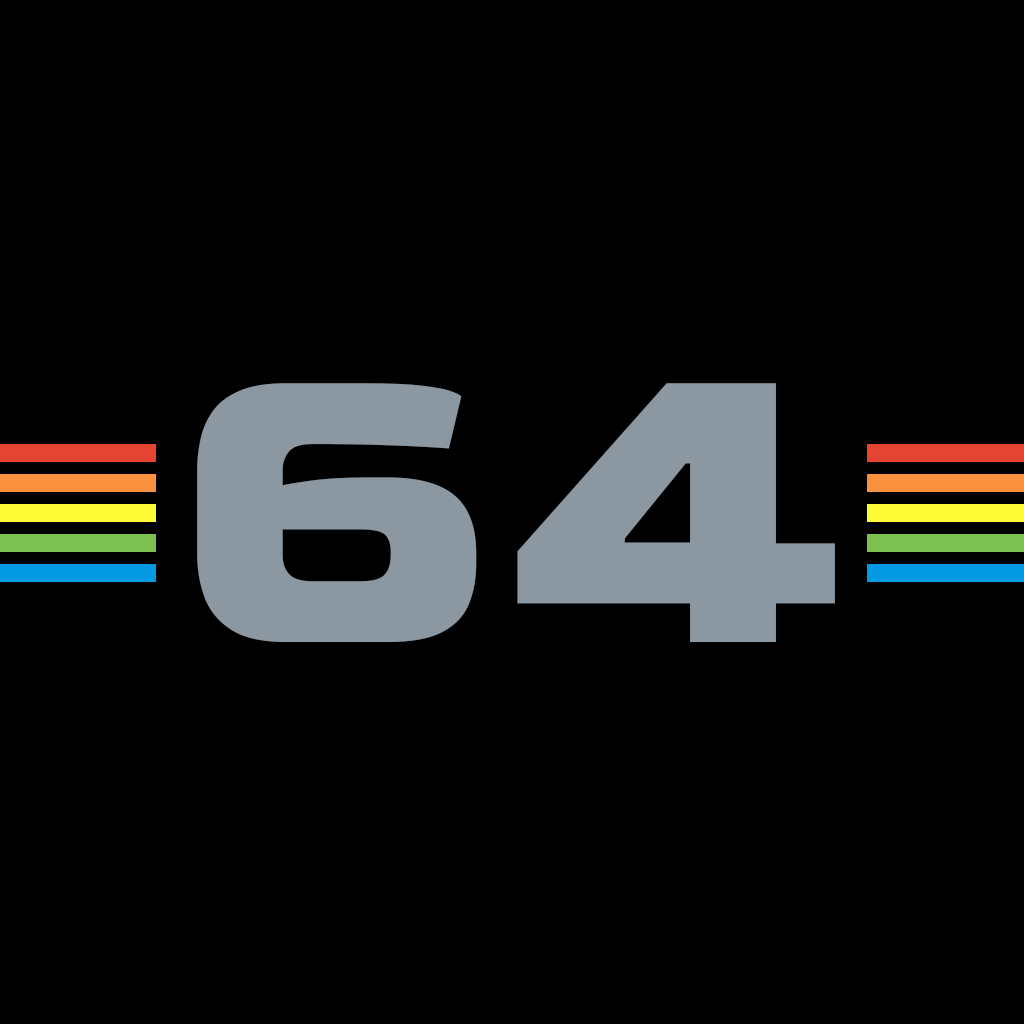
<style>
.page{position:relative;width:1024px;height:1024px;background:#000000}
.page>*{position:absolute;margin:0}
.t1{font:440.1px "Goldman-Bold";color:#8b98a1}
</style>
<div class="page">
<p class="t1" style="left:197px;top:383px;width:638px;height:259px">64</p>
</div>
